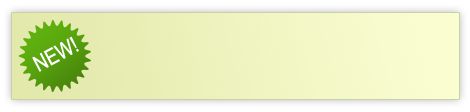
<style>
.page{position:relative;width:470px;height:112px}
.page>*{position:absolute;margin:0}
.t1{font:22px "ArialNarrow";color:#ffffff}
</style>
<div class="page">
<p class="t1" style="left:32px;top:36px;width:47px;height:36px;rotate:-28deg">NEW!</p>
</div>
